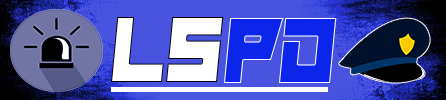
<style>
.page{position:relative;width:446px;height:100px;background:#4854df}
.page>*{position:absolute;margin:0}
.t1{font:94.5px "Hindsight2020";color:#ffffff;scale:0.92 1}
.t2{font:94.5px "Hindsight2020";color:#0b25eb;scale:0.92 1}
</style>
<div class="page">
<p class="t1" style="left:111px;top:17px;width:113px;height:65px">ls</p>
<p class="t2" style="left:224px;top:18px;width:113px;height:65px">pd</p>
</div>
